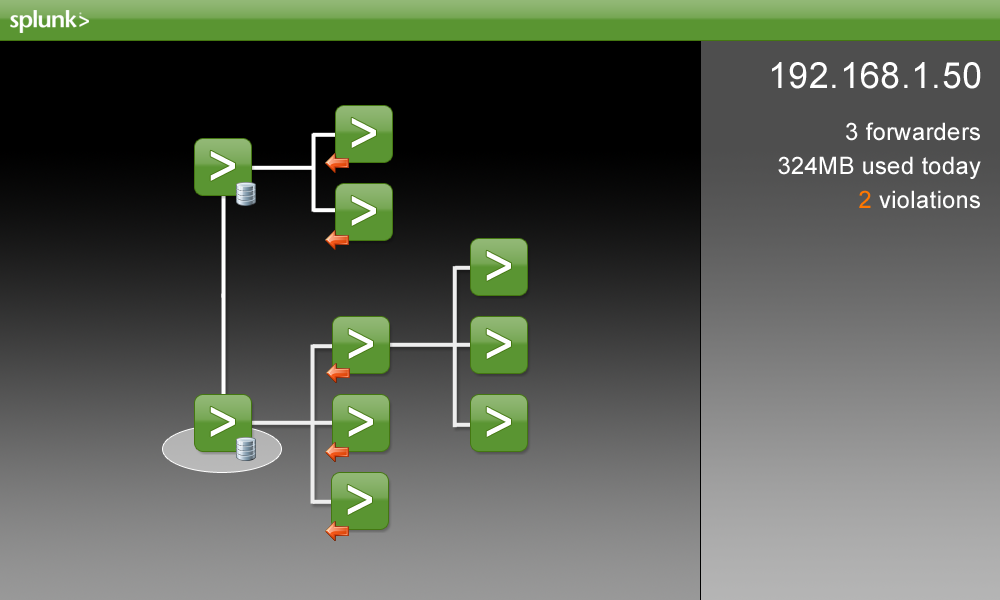
<style>
.page{position:relative;width:1000px;height:600px}
.page>*{position:absolute;margin:0}
.t1{font:36px "ArialMT";letter-spacing:0.01em;color:#ffffff}
.t2{font:24px "ArialMT";letter-spacing:0.01em;color:#ffffff}
.t3{font:24px "ArialMT";letter-spacing:0.01em;color:#ff7700}
</style>
<div class="page">
<p class="t1" style="left:772px;top:62px;width:209px;height:27px">192.168.1.50</p>
<p class="t2" style="left:846px;top:122px;width:134px;height:19px">3 forwarders</p>
<p class="t2" style="left:778px;top:156px;width:203px;height:23px">324MB used today</p>
<p class="t2" style="left:859px;top:190px;width:121px;height:19px"><span class="t3">2</span> violations</p>
</div>
